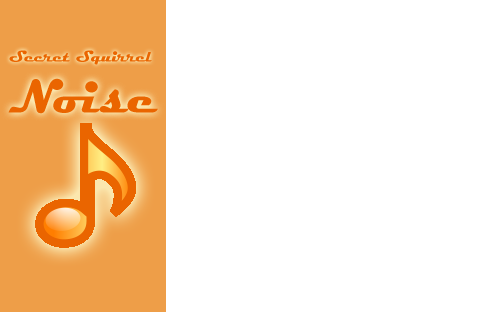
<style>
.page{position:relative;width:493px;height:312px;background:#ffffff}
.page>*{position:absolute;margin:0}
.t1{font:16px "Magneto-Bold";color:#ea6500}
.t2{font:48px "Magneto-Bold";color:#ea6500}
</style>
<div class="page">
<p class="t1" style="left:9px;top:50px;width:143px;height:15px">Secret Squirrel</p>
<p class="t2" style="left:8px;top:78px;width:150px;height:36px">Noise</p>
</div>
